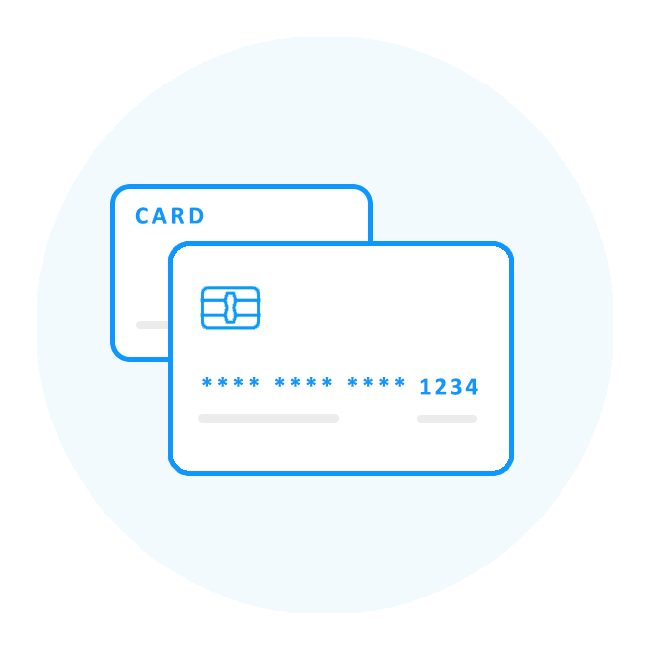
<style>
.page{position:relative;width:650px;height:650px;background:#ffffff}
.page>*{position:absolute;margin:0}
.t1{font:25px "Calibri-Bold";letter-spacing:0.15em;color:#0d97ff}
.t2{font:25px "Calibri-Bold";letter-spacing:0.1em;color:#0d97ff}
</style>
<div class="page">
<p class="t1" style="left:135px;top:207px;width:69px;height:17px">CARD</p>
<p class="t1" style="left:202px;top:377px;width:276px;height:18px">**** **** **** <span class="t2">1234</span></p>
</div>
